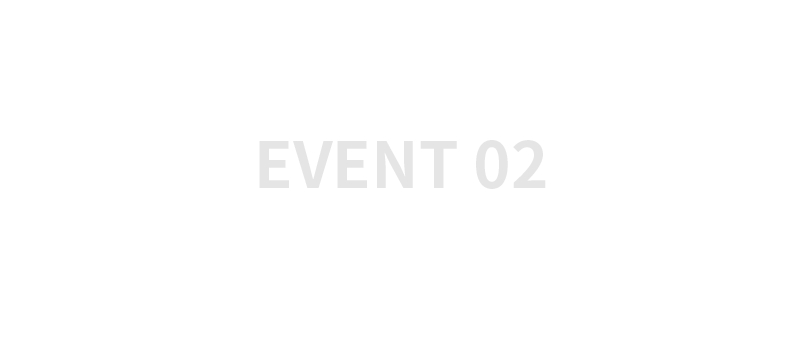
<style>
.page{position:relative;width:800px;height:350px;background:#ffffff}
.page>*{position:absolute;margin:0}
.t1{font:63.3px "NotoSansCJKkr-Bold";color:#e5e5e5;text-transform:uppercase}
</style>
<div class="page">
<p class="t1" style="left:259px;top:140px;width:287px;height:49px">event 02</p>
</div>
